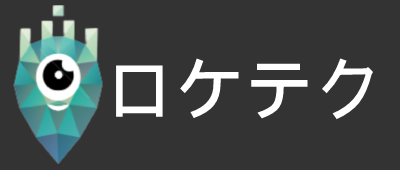
<style>
.page{position:relative;width:400px;height:170px;background:#333333}
.page>*{position:absolute;margin:0}
.t1{font:70px "DroidSansFallback";color:#ffffff}
</style>
<div class="page">
<p class="t1" style="left:116px;top:58px;width:257px;height:62px">ロケテク</p>
</div>
